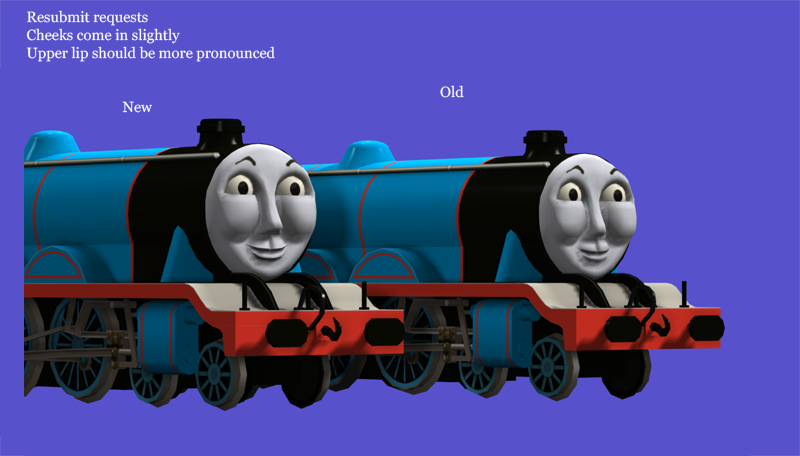
<style>
.page{position:relative;width:800px;height:456px;background:#5751cc}
.page>*{position:absolute;margin:0}
.t1{font:14.8px "Georgia";color:#fafafa}
</style>
<div class="page">
<p class="t1" style="left:26px;top:10px;width:249px;height:52px">Resubmit requests<br>Cheeks come in slightly<br>Upper lip should be more pronounced</p>
<p class="t1" style="left:440px;top:85px;width:24px;height:13px">Old</p>
<p class="t1" style="left:122px;top:101px;width:31px;height:12px">New</p>
</div>
